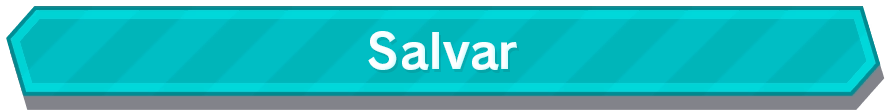
<style>
.page{position:relative;width:887px;height:110px;background:#00bec4}
.page>*{position:absolute;margin:0}
.t1{font:48px "RodinPro-B";color:#fffeff}
</style>
<div class="page">
<p class="t1" style="left:368px;top:31px;width:149px;height:39px">Salvar</p>
</div>
